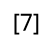
<style>
.page{position:relative;width:53px;height:41px;background:#ffffff}
.page>*{position:absolute;margin:0}
.t1{font:23.7px "DroidSans";color:#000000}
</style>
<div class="page">
<p class="t1" style="left:14px;top:13px;width:25px;height:22px">[7]</p>
</div>
